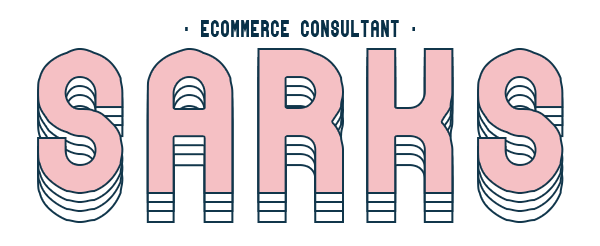
<style>
.page{position:relative;width:600px;height:246px;background:#ffffff}
.page>*{position:absolute;margin:0}
.t1{font:26.4px "absender";color:#083047;text-transform:uppercase;scale:0.76 1}
.t2{font:220px "absender";color:#f5c0c4;text-transform:uppercase}
.t3{font:220px "absender";text-transform:uppercase}
</style>
<div class="page">
<p class="t1" style="left:185px;top:20px;width:230px;height:17px">- ecommerce consultant -</p>
<p class="t2" style="left:37px;top:48px;width:527px;height:146px">sarks</p>
<p class="t2" style="left:37px;top:57px;width:527px;height:146px">sarks</p>
<p class="t3" style="left:37px;top:77px;width:527px;height:146px">sarks</p>
<p class="t3" style="left:37px;top:66px;width:527px;height:146px">sarks</p>
</div>
